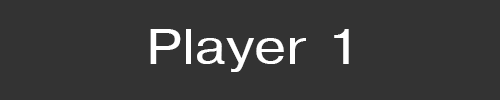
<style>
.page{position:relative;width:500px;height:100px;background:#333333}
.page>*{position:absolute;margin:0}
.t1{font:48px "Helvetica";color:#ffffff;scale:1.2 1}
</style>
<div class="page">
<p class="t1" style="left:150px;top:29px;width:199px;height:43px">Player 1</p>
</div>
